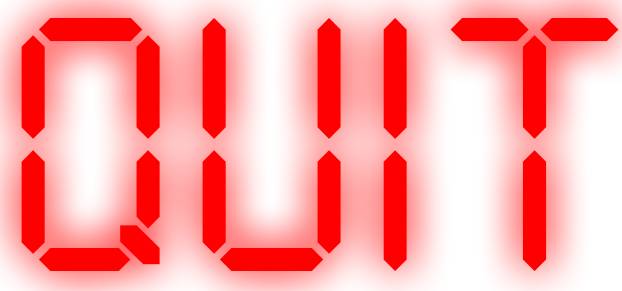
<style>
.page{position:relative;width:622px;height:291px}
.page>*{position:absolute;margin:0}
.t1{font:361.2px "SevenSegmentRegular";color:#ff0000}
</style>
<div class="page">
<p class="t1" style="left:21px;top:18px;width:598px;height:253px">quit</p>
</div>
